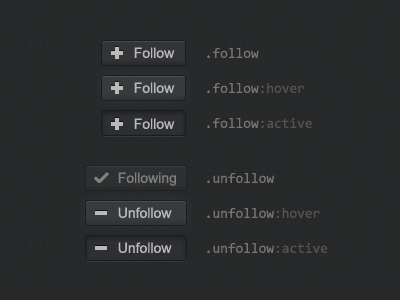
<style>
.page{position:relative;width:400px;height:300px;background:#27292a}
.page>*{position:absolute;margin:0}
.t1{font:14px "ArialMT";color:#bbbab7}
.t2{font:14px "Consolas";color:#757472}
.t3{font:14px "Consolas";color:#545352}
.t4{font:14px "ArialMT";color:#80807e}
</style>
<div class="page">
<p class="t1" style="left:134px;top:47px;width:41px;height:11px">Follow</p>
<p class="t2" style="left:207px;top:48px;width:52px;height:10px">.follow</p>
<p class="t1" style="left:134px;top:82px;width:41px;height:11px">Follow</p>
<p class="t2" style="left:207px;top:83px;width:98px;height:10px">.follow<span class="t3">:hover</span></p>
<p class="t1" style="left:134px;top:118px;width:41px;height:11px">Follow</p>
<p class="t2" style="left:207px;top:118px;width:105px;height:10px">.follow<span class="t3">:active</span></p>
<p class="t4" style="left:118px;top:172px;width:58px;height:14px">Following</p>
<p class="t2" style="left:207px;top:173px;width:67px;height:10px">.unfollow</p>
<p class="t1" style="left:118px;top:207px;width:54px;height:11px">Unfollow</p>
<p class="t2" style="left:207px;top:208px;width:113px;height:10px">.unfollow<span class="t3">:hover</span></p>
<p class="t1" style="left:118px;top:242px;width:54px;height:11px">Unfollow</p>
<p class="t2" style="left:207px;top:243px;width:121px;height:10px">.unfollow<span class="t3">:active</span></p>
</div>
